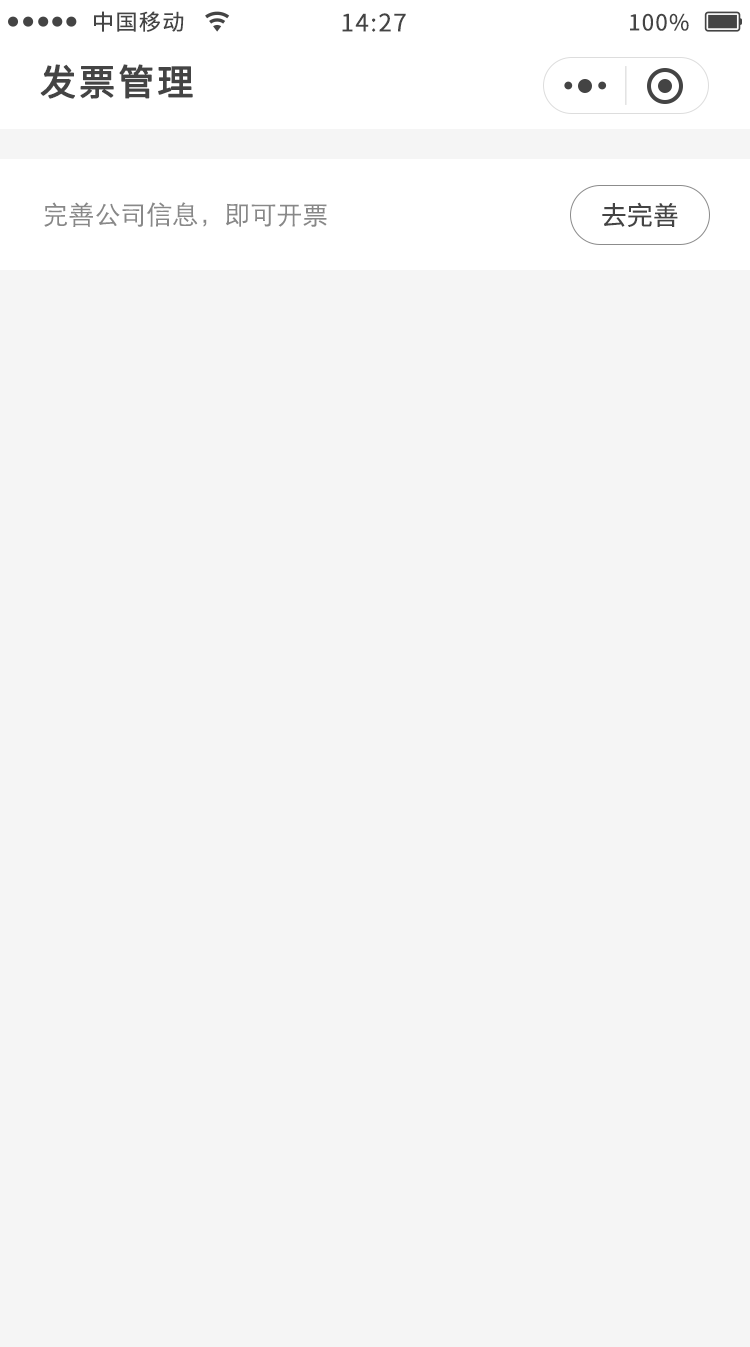
<style>
.page{position:relative;width:750px;height:1347px;background:#f5f5f5}
.page>*{position:absolute;margin:0}
.t1{font:22px "NotoSansCJKsc-Regular";letter-spacing:0.06em;color:#444444}
.t2{font:24px "NotoSansCJKsc-Regular";letter-spacing:0.06em;color:#444444}
.t3{font:36px "NotoSansCJKsc-Regular";letter-spacing:0.06em;color:#444444;font-weight:bold}
.t4{font:26px "STXihei";color:#888888}
.t5{font:26px "NotoSansCJKsc-Regular";color:#444444}
</style>
<div class="page">
<p class="t1" style="left:94px;top:11px;width:90px;height:21px">中国移动</p>
<p class="t2" style="left:342px;top:13px;width:64px;height:19px">14:27</p>
<p class="t1" style="left:630px;top:13px;width:59px;height:18px">100%</p>
<p class="t3" style="left:40px;top:64px;width:153px;height:35px">发票管理</p>
<p class="t4" style="left:44px;top:202px;width:283px;height:25px">完善公司信息，即可开票</p>
<p class="t5" style="left:602px;top:202px;width:76px;height:25px">去完善</p>
</div>
